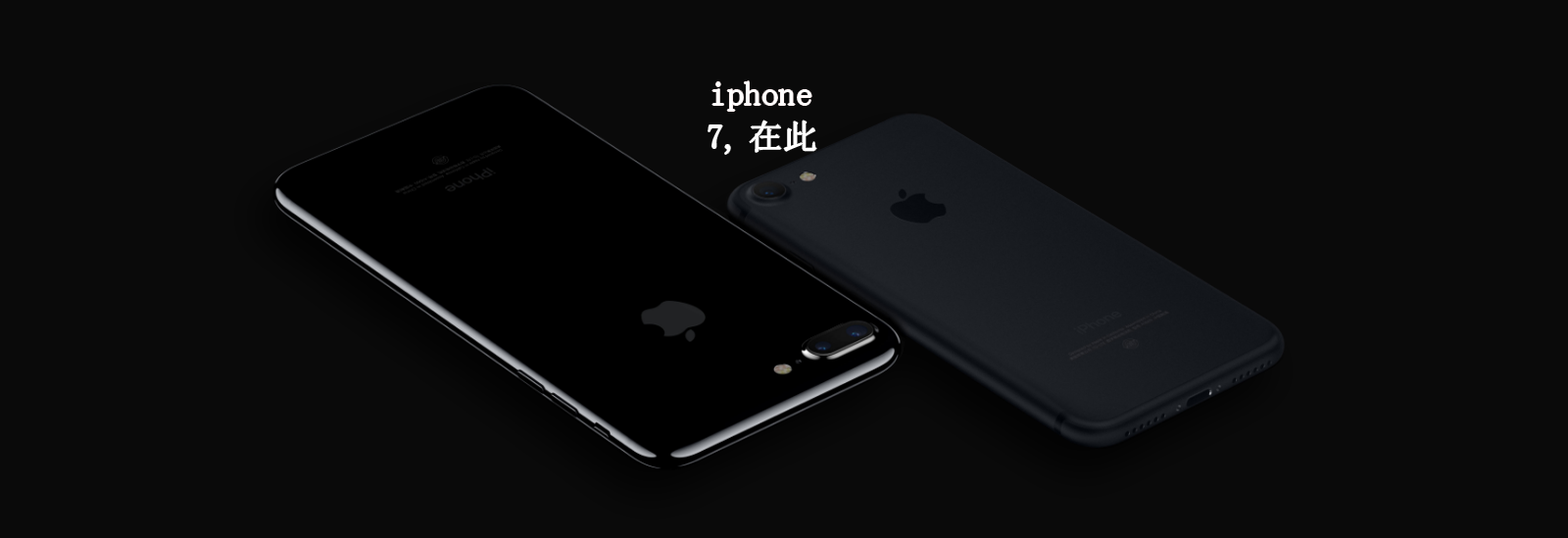
<style>
.page{position:relative;width:1568px;height:538px;background:#0a0a0a}
.page>*{position:absolute;margin:0}
.t1{font:34.3px "SimSun";color:#ffffff}
</style>
<div class="page">
<p class="t1" style="left:712px;top:81px;width:99px;height:30px">iphone</p>
<p class="t1" style="left:709px;top:121px;width:107px;height:33px">7,在此</p>
</div>
